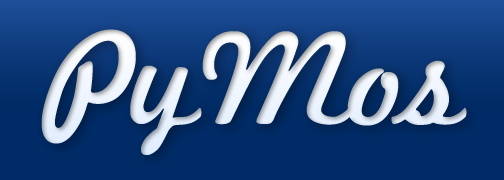
<style>
.page{position:relative;width:504px;height:180px;background:#002b66}
.page>*{position:absolute;margin:0}
.t1{font:140px "MarketingScript"}
</style>
<div class="page">
<p class="t1" style="left:41px;top:29px;width:426px;height:126px">PyMos</p>
</div>
